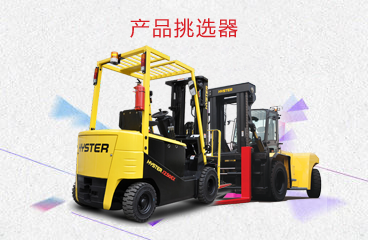
<style>
.page{position:relative;width:368px;height:240px}
.page>*{position:absolute;margin:0}
.t1{font:20px "MicrosoftYaHei";letter-spacing:0.1em;color:#d91f26}
</style>
<div class="page">
<p class="t1" style="left:130px;top:18px;width:108px;height:20px">产品挑选器</p>
</div>
